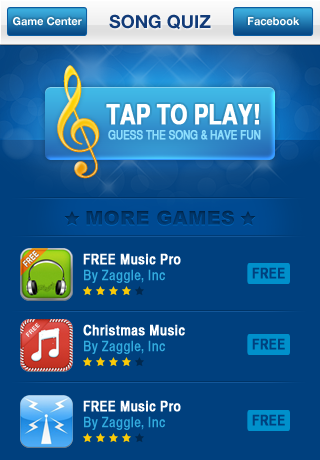
<style>
.page{position:relative;width:320px;height:460px;background:#00407e}
.page>*{position:absolute;margin:0}
.t1{font:11px "HelveticaNeue-Bold";color:#ffffff}
.t2{font:18px "HelveticaNeue-Bold";color:#123b78}
.t3{font:28px "HelveticaCYBold";letter-spacing:-0.02em;color:#ffffff;text-transform:uppercase;font-weight:bold;scale:0.95 1}
.t4{font:12px "HelveticaCYPlain";letter-spacing:-0.02em;color:#8ddefd;text-transform:uppercase;font-weight:bold}
.t5{font:19px "Arial-Black";letter-spacing:0.025em;color:#003569}
.t6{font:14px/16px "HelveticaCYBold";letter-spacing:0.025em;color:#ffffff;font-weight:bold}
.t7{font:14px/16px "HelveticaCYBold";letter-spacing:0.025em;color:#32abde}
.t8{font:14px "HelveticaCYBold";letter-spacing:0.025em;color:#00407e;font-weight:bold}
</style>
<div class="page">
<p class="t1" style="left:13px;top:17px;width:69px;height:9px">Game Center</p>
<p class="t2" style="left:109px;top:14px;width:102px;height:16px">SONG QUIZ</p>
<p class="t1" style="left:248px;top:17px;width:52px;height:9px">Facebook</p>
<p class="t3" style="left:106px;top:104px;width:153px;height:21px">TAP TO PLAY!</p>
<p class="t4" style="left:108px;top:130px;width:153px;height:10px">GUESS THE SONG &amp; HAVE FUN</p>
<p class="t5" style="left:86px;top:210px;width:148px;height:15px">MORE GAMES</p>
<p class="t6" style="left:83px;top:253px;width:98px;height:30px">FREE Music Pro<br><span class="t7">By Zaggle, Inc</span></p>
<p class="t8" style="left:252px;top:267px;width:33px;height:12px">FREE</p>
<p class="t6" style="left:83px;top:324px;width:102px;height:30px">Christmas Music<br><span class="t7">By Zaggle, Inc</span></p>
<p class="t8" style="left:252px;top:338px;width:33px;height:12px">FREE</p>
<p class="t6" style="left:83px;top:400px;width:98px;height:30px">FREE Music Pro<br><span class="t7">By Zaggle, Inc</span></p>
<p class="t8" style="left:252px;top:414px;width:33px;height:12px">FREE</p>
</div>
